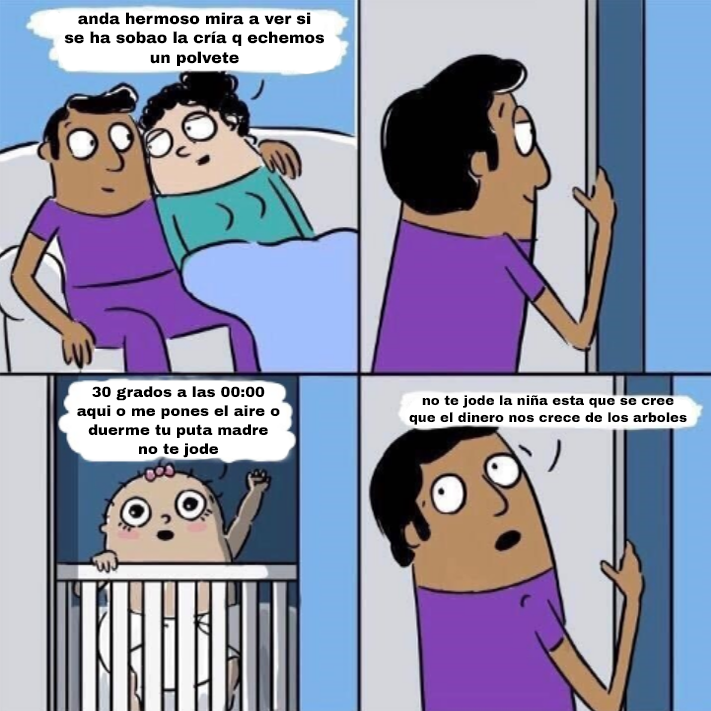
<style>
.page{position:relative;width:711px;height:711px}
.page>*{position:absolute;margin:0}
.t1{font:15.7px "ArchivoBlack-Regular";color:#000000}
.t2{font:14.8px "ArchivoBlack-Regular";color:#000000}
.t3{font:13.3px "ArchivoBlack-Regular";color:#000000}
</style>
<div class="page">
<p class="t1" style="left:64px;top:12px;width:260px;height:54px;text-align:center">anda hermoso mira a ver si<br>se ha sobao la cría q echemos<br>un polvete</p>
<p class="t2" style="left:77px;top:386px;width:203px;height:72px;text-align:center">30 grados a las 00:00<br>aqui o me pones el aire o<br>duerme tu puta madre<br>no te jode</p>
<p class="t3" style="left:409px;top:395px;width:278px;height:30px;text-align:center">no te jode la niña esta que se cree<br>que el dinero nos crece de los arboles</p>
</div>
